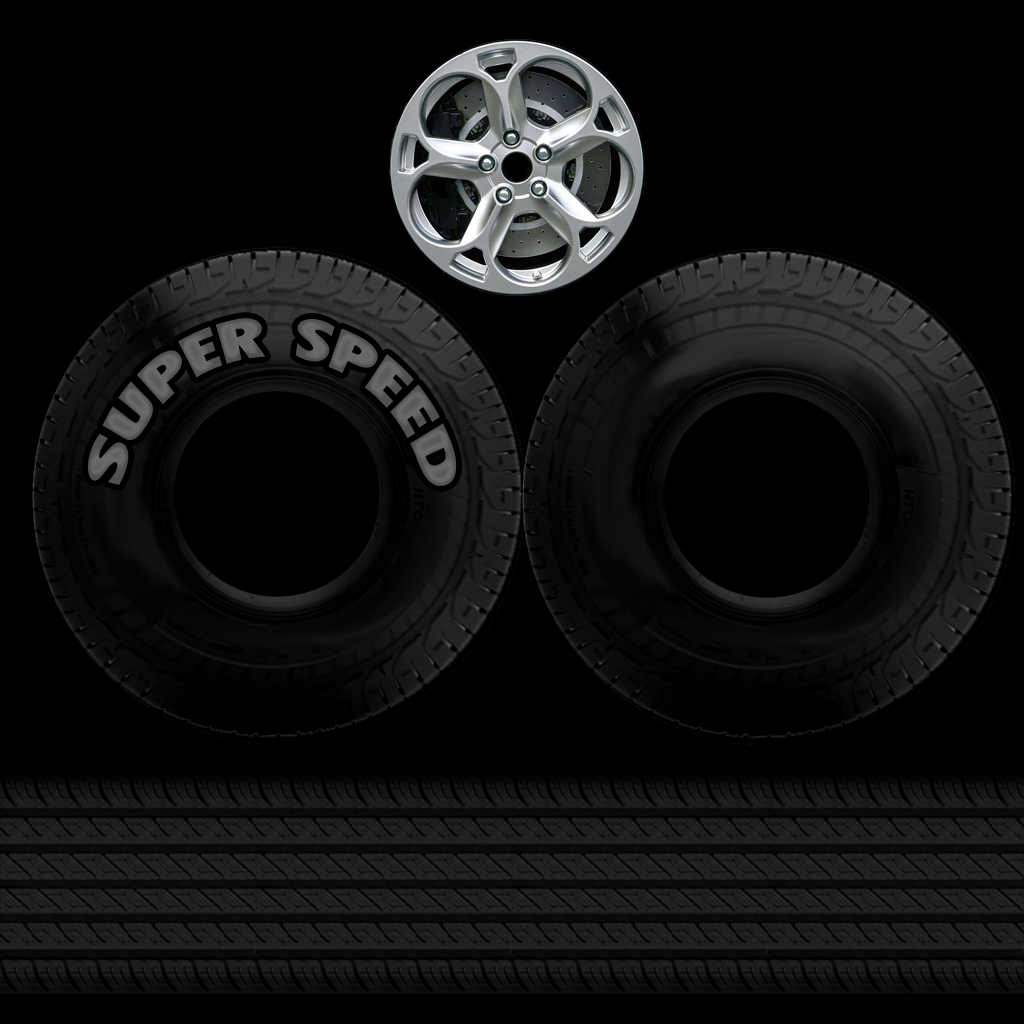
<style>
.page{position:relative;width:1024px;height:1024px;background:#000000}
.page>*{position:absolute;margin:0}
.t1{font:81.3px "FuturaBT-ExtraBlackCondensed";color:#505050;font-variant:small-caps;scale:0.92 1}
</style>
<div class="page">
<p class="t1" style="left:88px;top:318px;width:369px;height:168px">super speed</p>
</div>
